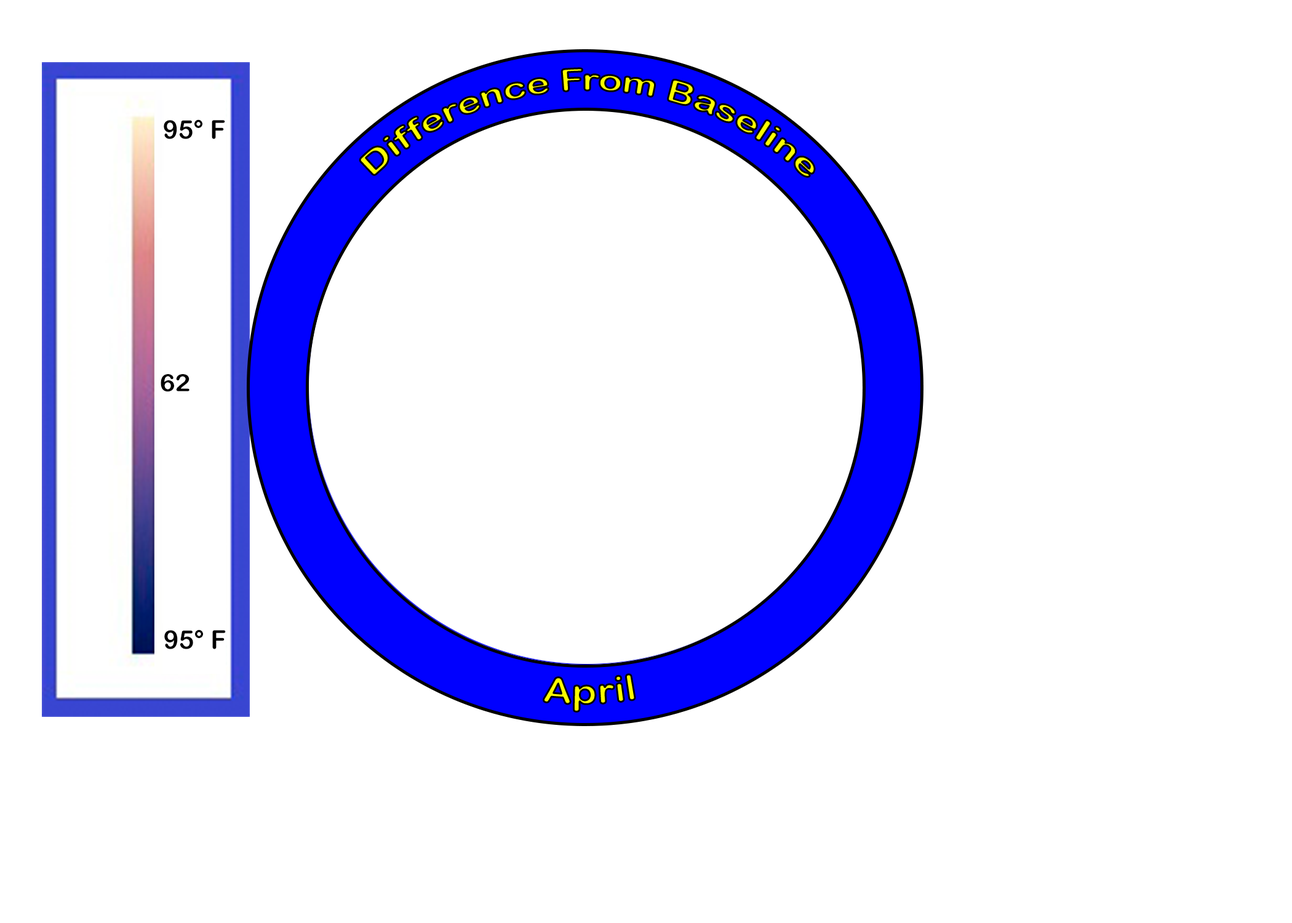
<style>
.page{position:relative;width:1292px;height:923px;background:#ffffff}
.page>*{position:absolute;margin:0}
.t1{font:30.8px "ArialRoundedMTBold"}
.t2{font:25.6px "ArialRoundedMTBold";color:#000000}
.t3{font:23.7px "ArialRoundedMTBold";color:#000000;scale:1.08 1}
.t4{font:35.9px "ArialRoundedMTBold"}
</style>
<div class="page">
<p class="t1" style="left:360px;top:68px;width:455px;height:109px;text-align:center">Difference From Baseline</p>
<p class="t2" style="left:164px;top:119px;width:61px;height:20px">95° F</p>
<p class="t3" style="left:161px;top:374px;width:29px;height:18px">62</p>
<p class="t2" style="left:164px;top:629px;width:62px;height:20px">95° F</p>
<p class="t4" style="left:543px;top:674px;width:92px;height:38px;rotate:-2deg">April</p>
</div>
